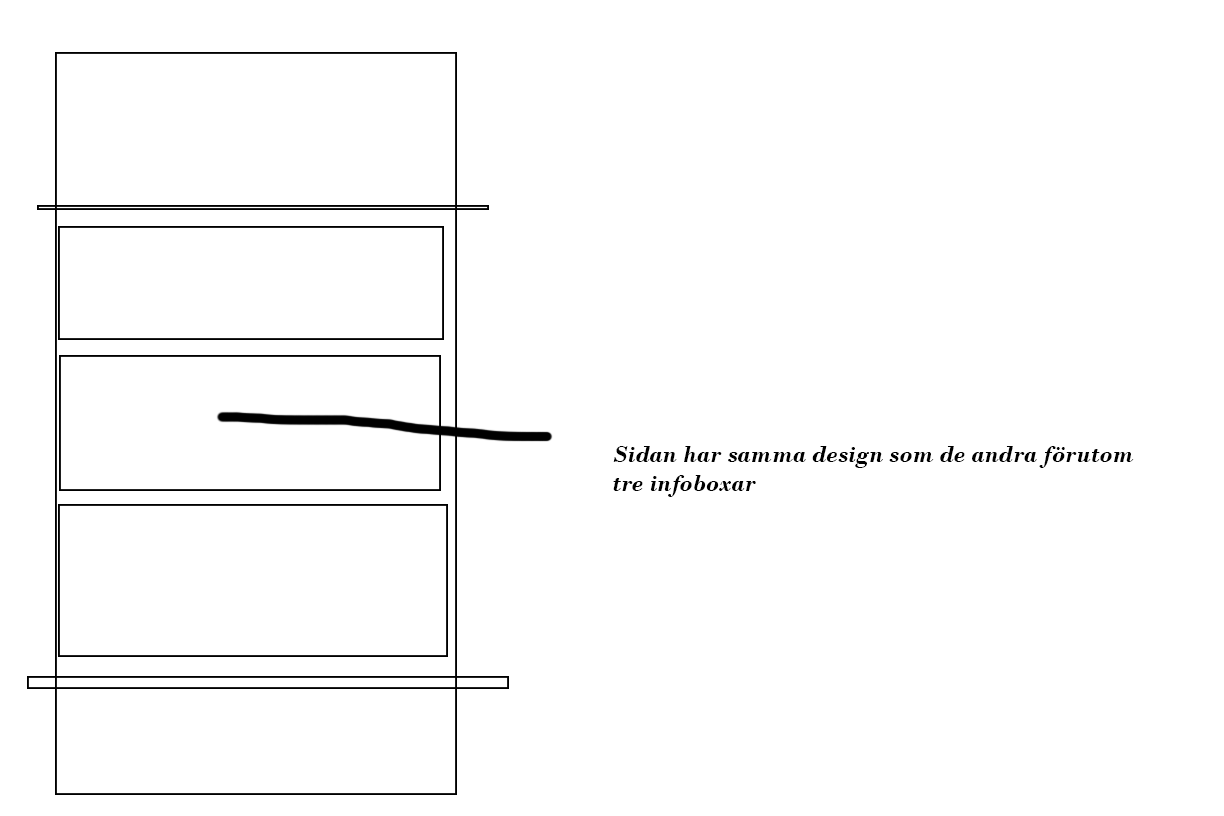
<style>
.page{position:relative;width:1224px;height:816px;background:#ffffff}
.page>*{position:absolute;margin:0}
.t1{font:24px "BodoniMT-BoldItalic";color:#000000}
</style>
<div class="page">
<p class="t1" style="left:613px;top:446px;width:521px;height:51px">Sidan har samma design som de andra förutom<br>tre infoboxar</p>
</div>
